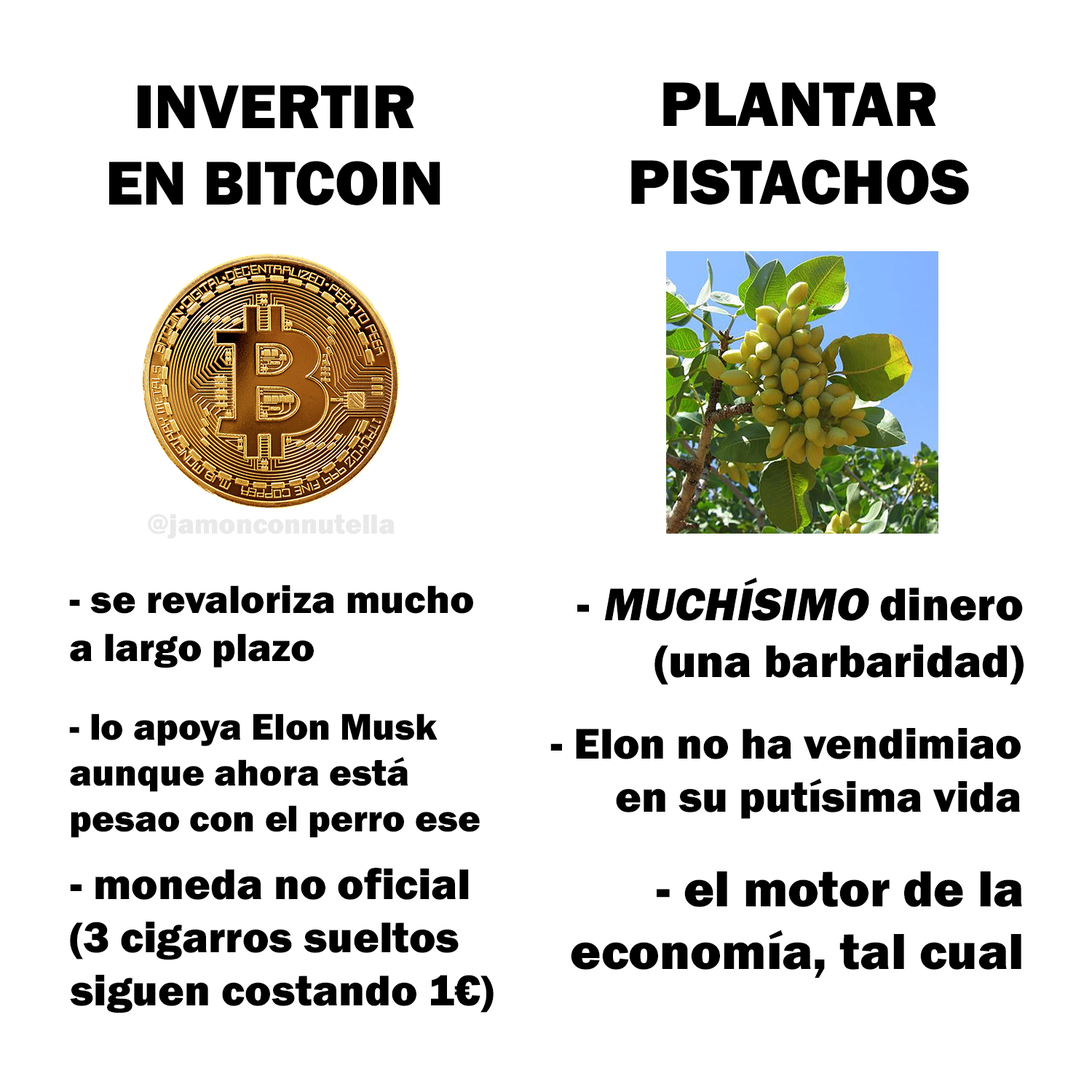
<style>
.page{position:relative;width:1092px;height:1092px;background:#ffffff}
.page>*{position:absolute;margin:0}
.t1{font:64.1px "FranklinGothic-Heavy";color:#000000}
.t2{font:65.3px "FranklinGothic-Heavy";color:#000000}
.t3{font:28.5px "FranklinGothic-Heavy";color:#e9e9e9}
.t4{font:47.6px "FranklinGothic-Heavy";color:#000000}
.t5{font:47.6px "FranklinGothic-Heavy";color:#000000;font-style:italic}
.t6{font:40.6px "FranklinGothic-Heavy";color:#000000}
.t7{font:38.4px "FranklinGothic-Heavy";color:#000000}
.t8{font:44.5px "FranklinGothic-Heavy";color:#000000}
.t9{font:44.6px "FranklinGothic-Heavy";color:#000000}
.t10{font:52.4px "FranklinGothic-Heavy";color:#000000}
</style>
<div class="page">
<p class="t1" style="left:109px;top:85px;width:331px;height:120px;text-align:center">INVERTIR<br>EN BITCOIN</p>
<p class="t2" style="left:631px;top:82px;width:338px;height:123px;text-align:center">PLANTAR<br>PISTACHOS</p>
<p class="t3" style="left:148px;top:514px;width:247px;height:25px">@jamonconnutella</p>
<p class="t4" style="left:577px;top:577px;width:447px;height:108px;text-align:right">- <span class="t5">MUCHÍSIMO </span>dinero<br>(una barbaridad)</p>
<p class="t6" style="left:69px;top:585px;width:404px;height:83px">- se revaloriza mucho<br>a largo plazo</p>
<p class="t7" style="left:69px;top:713px;width:411px;height:125px">- lo apoya Elon Musk<br>aunque ahora está<br>pesao con el perro ese</p>
<p class="t8" style="left:550px;top:728px;width:471px;height:91px;text-align:right">- Elon no ha vendimiao<br>en su putísima vida</p>
<p class="t9" style="left:70px;top:868px;width:424px;height:145px">- moneda no oficial<br>(3 cigarros sueltos<br>siguen costando 1€)</p>
<p class="t10" style="left:571px;top:871px;width:451px;height:107px;text-align:right">- el motor de la<br>economía, tal cual</p>
</div>
